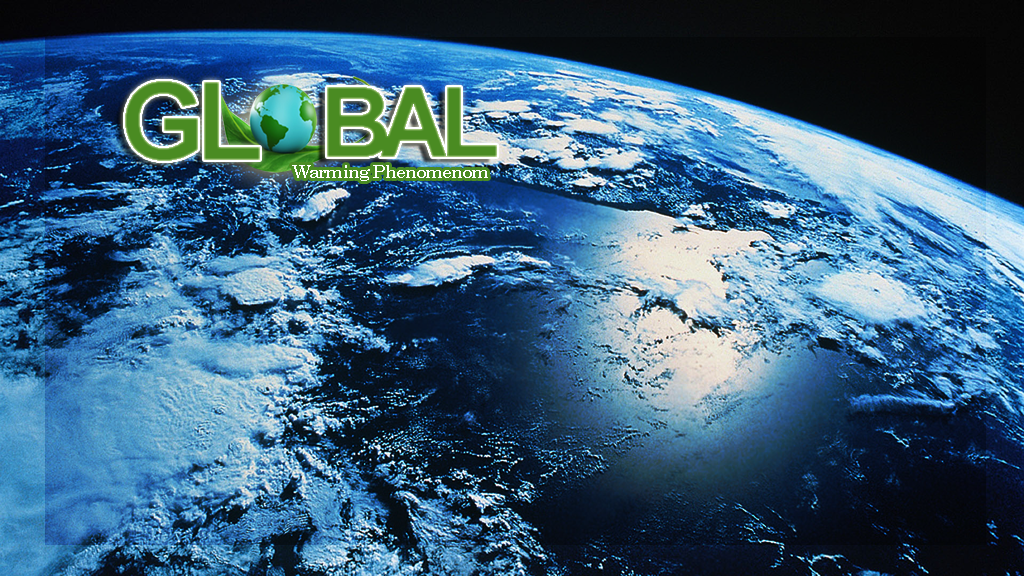
<style>
.page{position:relative;width:1024px;height:576px}
.page>*{position:absolute;margin:0}
.t1{font:108.5px "Arial-BoldMT";letter-spacing:-0.08em;color:#4a8b22}
.t2{font:98.4px "Arial-BoldMT";letter-spacing:-0.08em;color:#4a8b22}
.t3{font:18.3px "CenturySchoolbook-Bold";letter-spacing:-0.075em;color:#ffffff}
</style>
<div class="page">
<p class="t1" style="left:125px;top:81px;width:135px;height:80px">GL</p>
<p class="t2" style="left:327px;top:87px;width:170px;height:70px">BAL</p>
<p class="t3" style="left:292px;top:165px;width:196px;height:16px">Warming Phenomenom</p>
</div>
